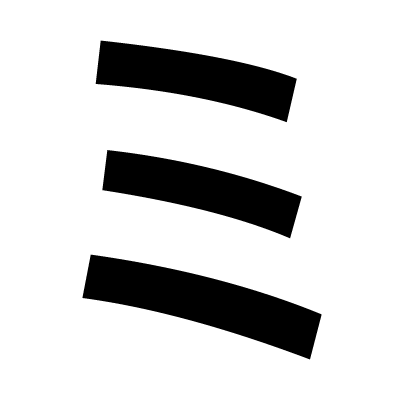
<style>
.page{position:relative;width:400px;height:400px;background:#ffffff}
.page>*{position:absolute;margin:0}
.t1{font:424.8px "MS-PGothic";color:#000000}
</style>
<div class="page">
<p class="t1" style="left:82px;top:40px;width:240px;height:320px">ミ</p>
</div>
